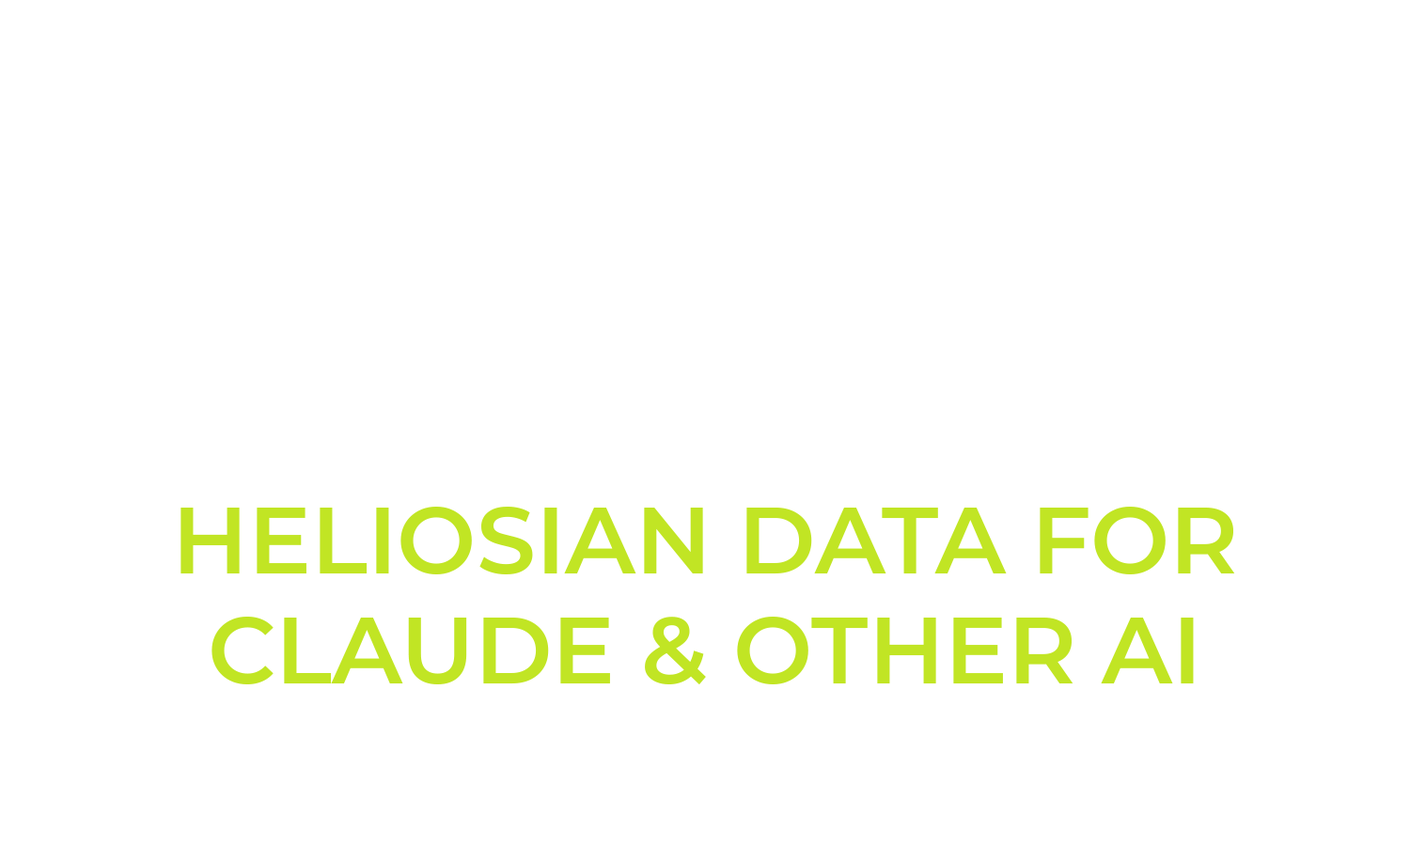
<style>
.page{position:relative;width:1410px;height:846px;background:#ffffff}
.page>*{position:absolute;margin:0}
.t1{font:94px/0.2px "Montserrat-SemiBold";color:#c1e524;text-transform:uppercase}
</style>
<div class="page">
<p class="t1" style="left:180px;top:507px;width:1055px;height:178px;text-align:center">HELIOSIAN DATA FOR<br>CLAUDE &amp; OTHER AI</p>
</div>
